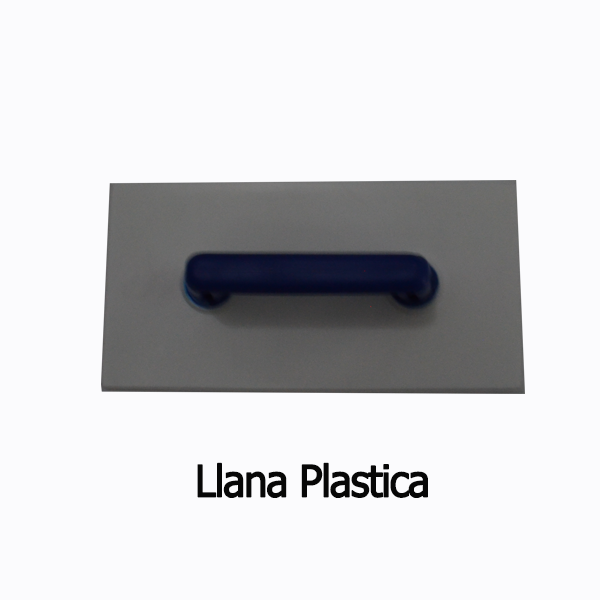
<style>
.page{position:relative;width:600px;height:600px;background:#fbfbfd}
.page>*{position:absolute;margin:0}
.t1{font:43.7px "Tahoma";letter-spacing:-0.05em;color:#070707;font-weight:bold;scale:0.95 1}
</style>
<div class="page">
<p class="t1" style="left:197px;top:462px;width:231px;height:36px">Llana Plastica</p>
</div>
